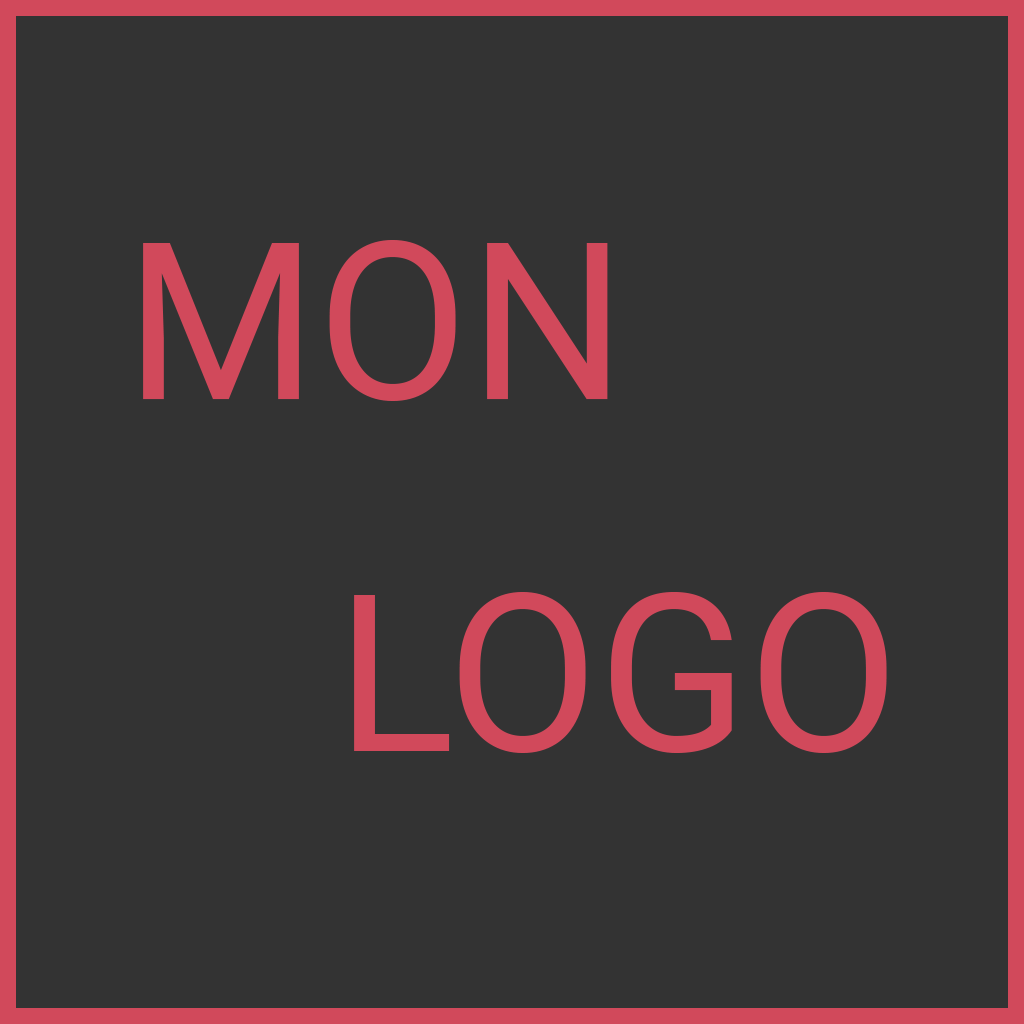
<style>
.page{position:relative;width:1024px;height:1024px;background:#333333}
.page>*{position:absolute;margin:0}
.t1{font:220px "Roboto-Regular";color:#d1495b}
</style>
<div class="page">
<p class="t1" style="left:143px;top:240px;width:465px;height:161px">MON</p>
<p class="t1" style="left:354px;top:592px;width:533px;height:161px">LOGO</p>
</div>
